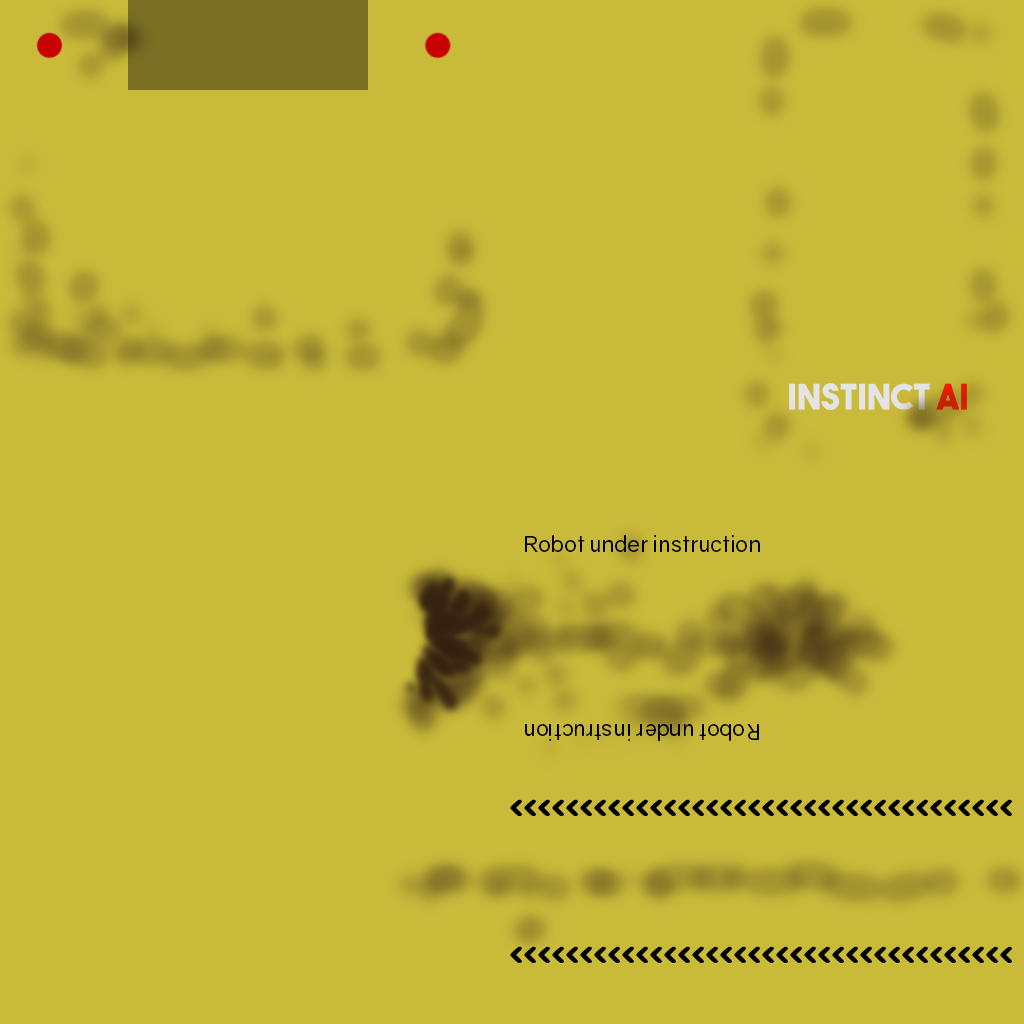
<style>
.page{position:relative;width:1024px;height:1024px;background:#c9ba3a}
.page>*{position:absolute;margin:0}
.t1{font:21.9px "Gravity-Regular";color:#000000}
.t2{font:48px "OstrichSans-Heavy";color:#000000}
</style>
<div class="page">
<p class="t1" style="left:525px;top:535px;width:235px;height:17px">Robot under instruction</p>
<p class="t1" style="left:525px;top:724px;width:234px;height:17px;rotate:180deg">Robot under instruction</p>
<p class="t2" style="left:510px;top:799px;width:502px;height:17px">&lt;&lt;&lt;&lt;&lt;&lt;&lt;&lt;&lt;&lt;&lt;&lt;&lt;&lt;&lt;&lt;&lt;&lt;&lt;&lt;&lt;&lt;&lt;&lt;&lt;&lt;&lt;&lt;&lt;&lt;&lt;&lt;&lt;&lt;&lt;&lt;</p>
<p class="t2" style="left:510px;top:946px;width:502px;height:17px">&lt;&lt;&lt;&lt;&lt;&lt;&lt;&lt;&lt;&lt;&lt;&lt;&lt;&lt;&lt;&lt;&lt;&lt;&lt;&lt;&lt;&lt;&lt;&lt;&lt;&lt;&lt;&lt;&lt;&lt;&lt;&lt;&lt;&lt;&lt;&lt;</p>
</div>
